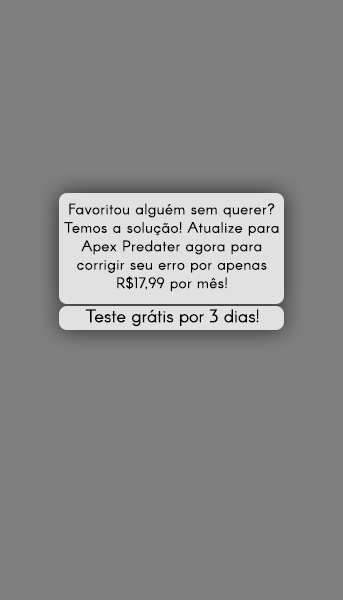
<style>
.page{position:relative;width:343px;height:600px;background:#7f7f7f}
.page>*{position:absolute;margin:0}
.t1{font:15px/21.4px "Arcon-Regular";letter-spacing:0.031em;color:#000000}
.t2{font:18px "Arcon-Regular";color:#000000}
</style>
<div class="page">
<p class="t1" style="left:64px;top:203px;width:215px;height:89px;text-align:center">Favoritou alguém sem querer?<br>Temos a solução! Atualize para<br>Apex Predater agora para<br>corrigir seu erro por apenas<br>R$17,99 por mês!</p>
<p class="t2" style="left:85px;top:309px;width:174px;height:18px">Teste grátis por 3 dias!</p>
</div>
